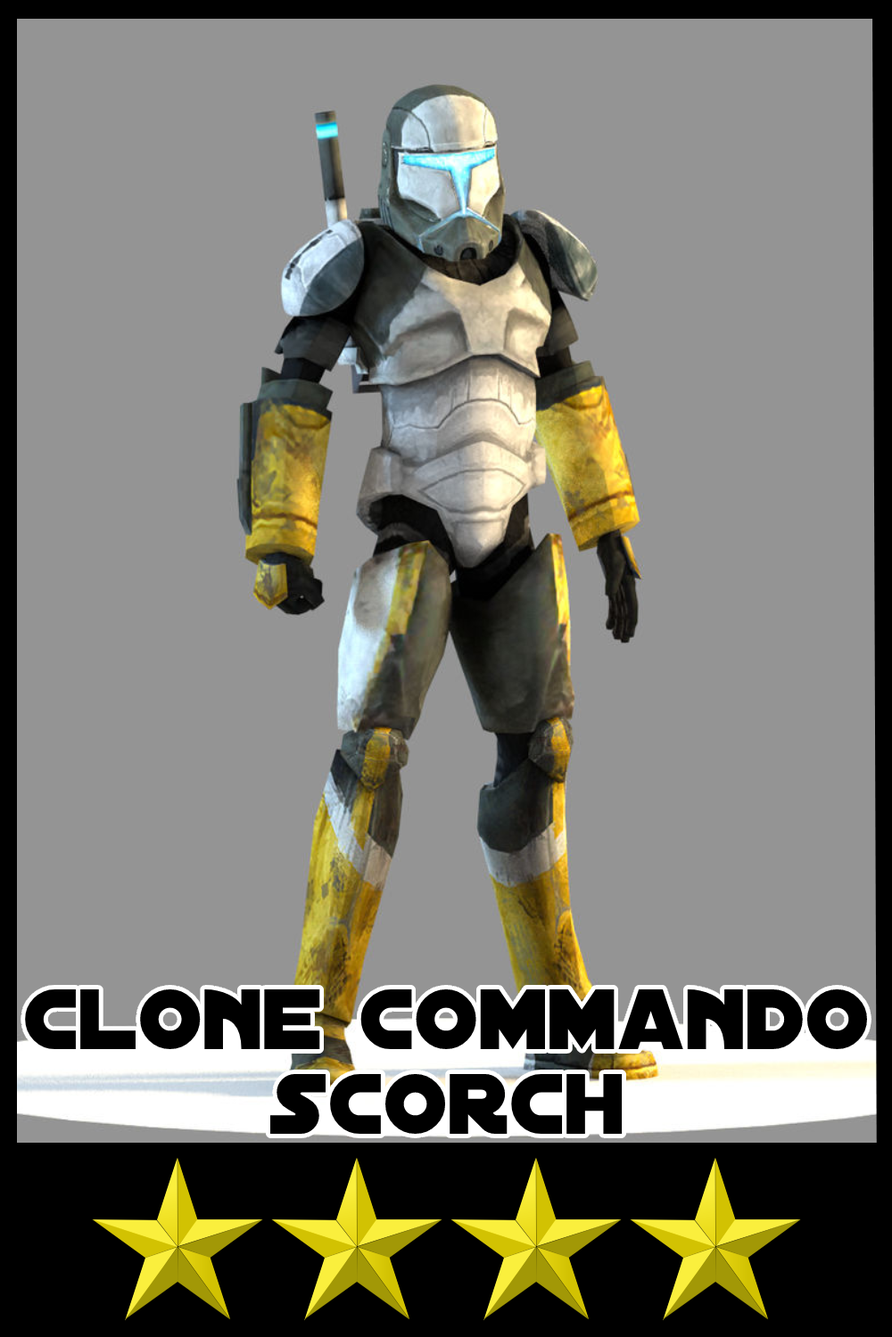
<style>
.page{position:relative;width:892px;height:1337px;background:#949494}
.page>*{position:absolute;margin:0}
.t1{font:92px/84.3px "DistantGalaxy";color:#000000}
</style>
<div class="page">
<p class="t1" style="left:25px;top:990px;width:842px;height:144px;text-align:center">clone commando<br>scorch</p>
</div>
